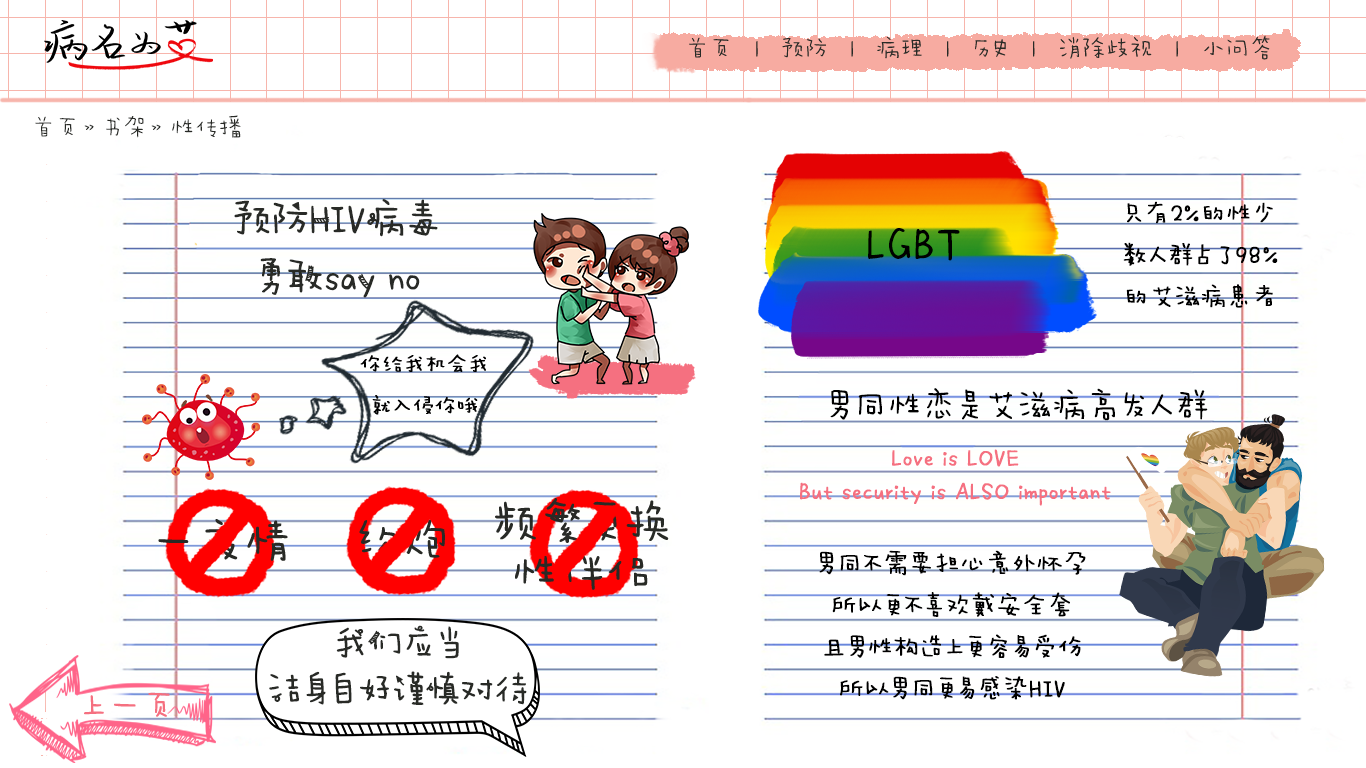
<style>
.page{position:relative;width:1366px;height:768px;background:#ffffff}
.page>*{position:absolute;margin:0}
.t1{font:24px "AaWanWan";color:#282a26}
.t2{font:37.5px/58.3px "AaPaperTape";color:#282a26;font-weight:bold}
.t3{font:25px/41.7px "AaWanWan";color:#000000;font-weight:bold}
.t4{font:33.3px "AaWanWan";color:#000000;font-weight:bold}
.t5{font:25px/33.3px "AaWanWan";color:#f57080;font-weight:bold}
</style>
<div class="page">
<p class="t1" style="left:35px;top:115px;width:206px;height:23px">首页》书架》性传播</p>
<p class="t2" style="left:234px;top:199px;width:204px;height:99px;text-align:center">预防HIV病毒<br>勇敢say no</p>
<p class="t3" style="left:1123px;top:201px;width:155px;height:107px;text-align:center">只有2%的性少<br>数人群占了98%<br>的艾滋病患者</p>
<p class="t4" style="left:830px;top:388px;width:378px;height:33px">男同性恋是艾滋病高发人群</p>
<p class="t5" style="left:800px;top:449px;width:311px;height:57px;text-align:center">Love is LOVE<br>But security is ALSO important</p>
<p class="t3" style="left:819px;top:550px;width:267px;height:150px;text-align:center">男同不需要担心意外怀孕<br>所以更不喜欢戴安全套<br>且男性构造上更容易受伤<br>所以男同更易感染HIV</p>
</div>
